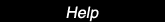
<style>
.page{position:relative;width:165px;height:22px;background:#000000}
.page>*{position:absolute;margin:0}
.t1{font:16px "ArialMT";color:#ffffff;font-style:italic}
</style>
<div class="page">
<p class="t1" style="left:66px;top:6px;width:33px;height:16px">Help</p>
</div>
